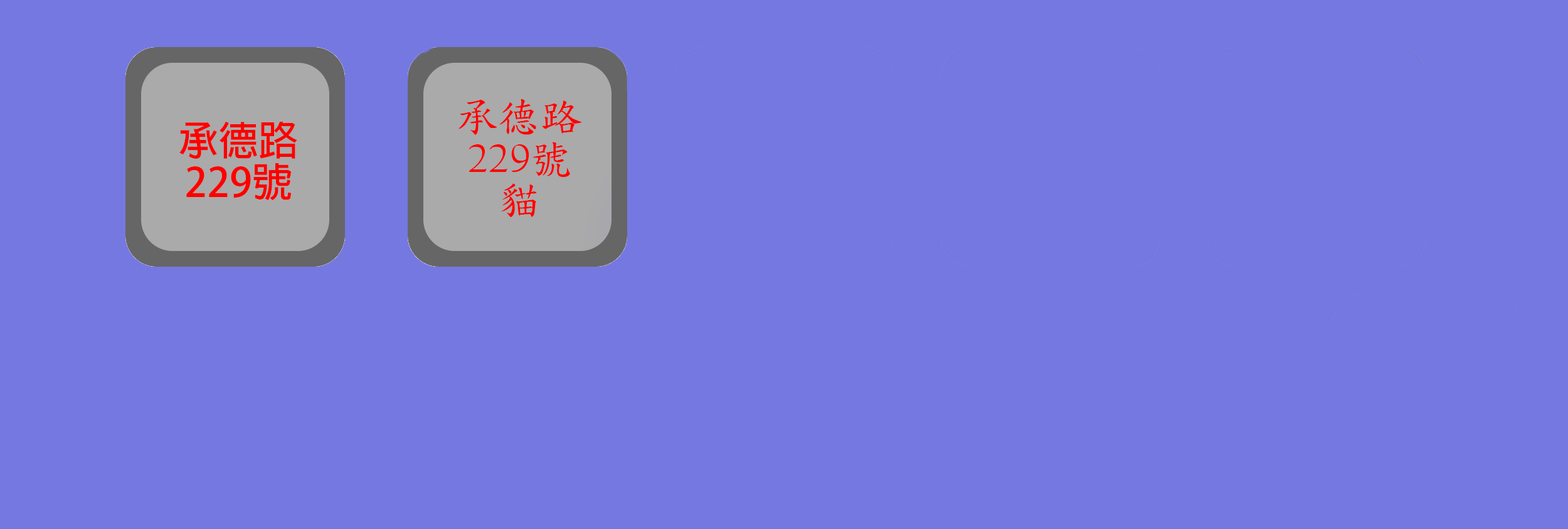
<style>
.page{position:relative;width:1568px;height:529px;background:#7578e1}
.page>*{position:absolute;margin:0}
.t1{font:41.8px/41.8px "DFKaiShu-SB-Estd-BF";color:#ff0000}
.t2{font:41.8px/41.8px "CalifornianFB-Reg";color:#ff0000}
</style>
<div class="page">
<p class="t1" style="left:458px;top:99px;width:124px;height:118px;text-align:center">承德路<span class="t2"><br>229</span>號<br>貓</p>
</div>
